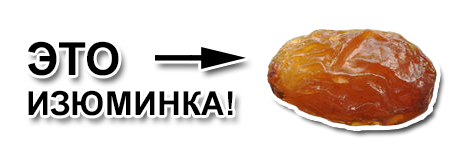
<style>
.page{position:relative;width:459px;height:160px;background:#ffffff}
.page>*{position:absolute;margin:0}
.t1{font:33.3px "Arial-BoldMT";color:#000000}
.t2{font:45.8px "Arial-BoldMT";color:#000000}
</style>
<div class="page">
<p class="t1" style="left:28px;top:41px;width:205px;height:75px"><span class="t2">ЭТО <br></span>ИЗЮМИНКА!</p>
</div>
